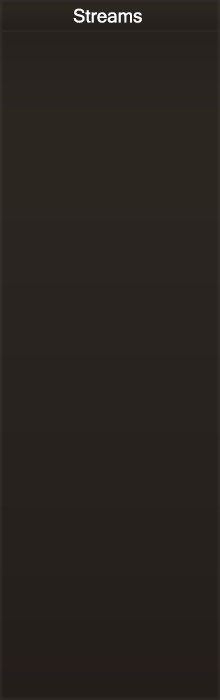
<style>
.page{position:relative;width:220px;height:700px}
.page>*{position:absolute;margin:0}
.t1{font:18px "Kartika";color:#ffffff}
</style>
<div class="page">
<p class="t1" style="left:73px;top:8px;width:69px;height:15px">Streams</p>
</div>
